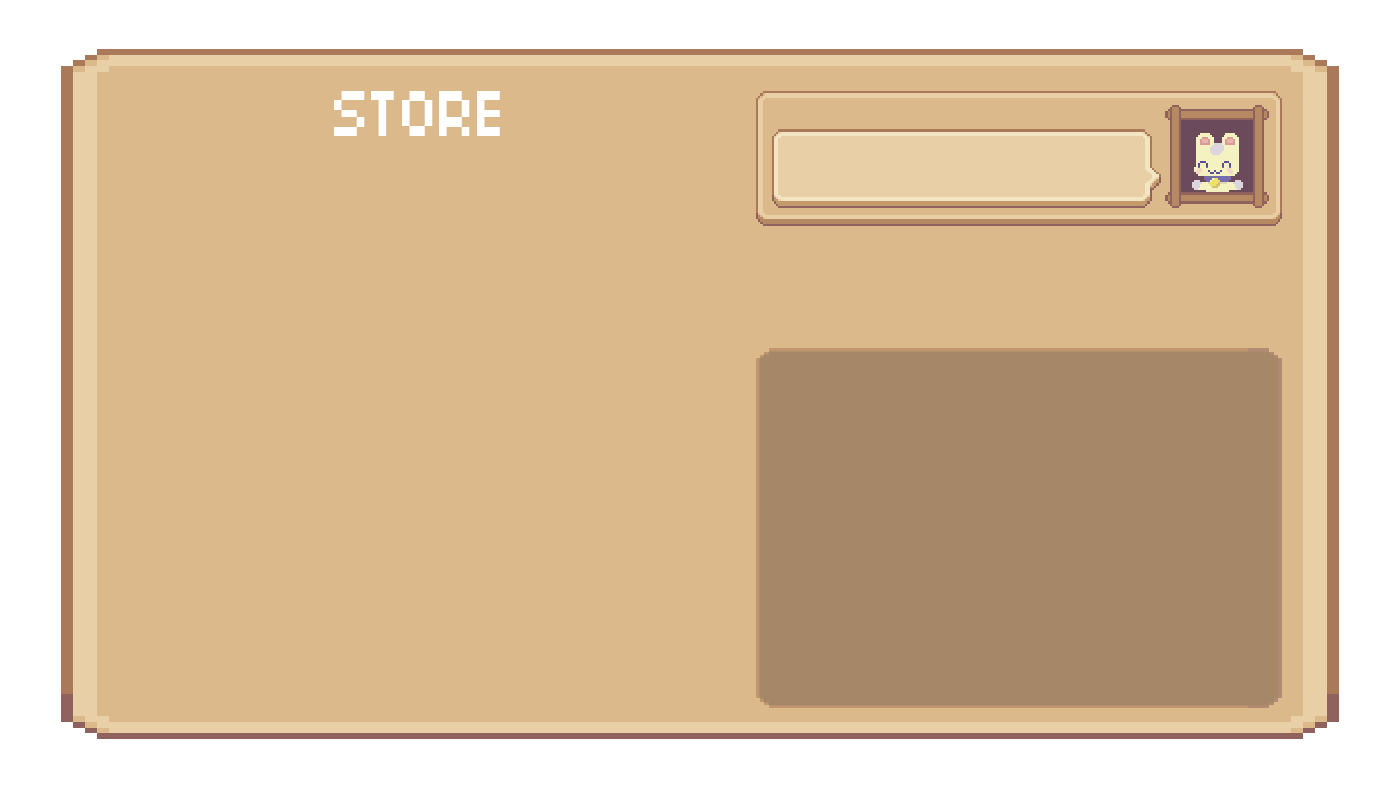
<style>
.page{position:relative;width:1400px;height:788px;background:#dcb98a}
.page>*{position:absolute;margin:0}
.t1{font:72px "04b03";color:#fffefe;scale:0.84 1}
</style>
<div class="page">
<p class="t1" style="left:334px;top:91px;width:166px;height:45px">STORE</p>
</div>
